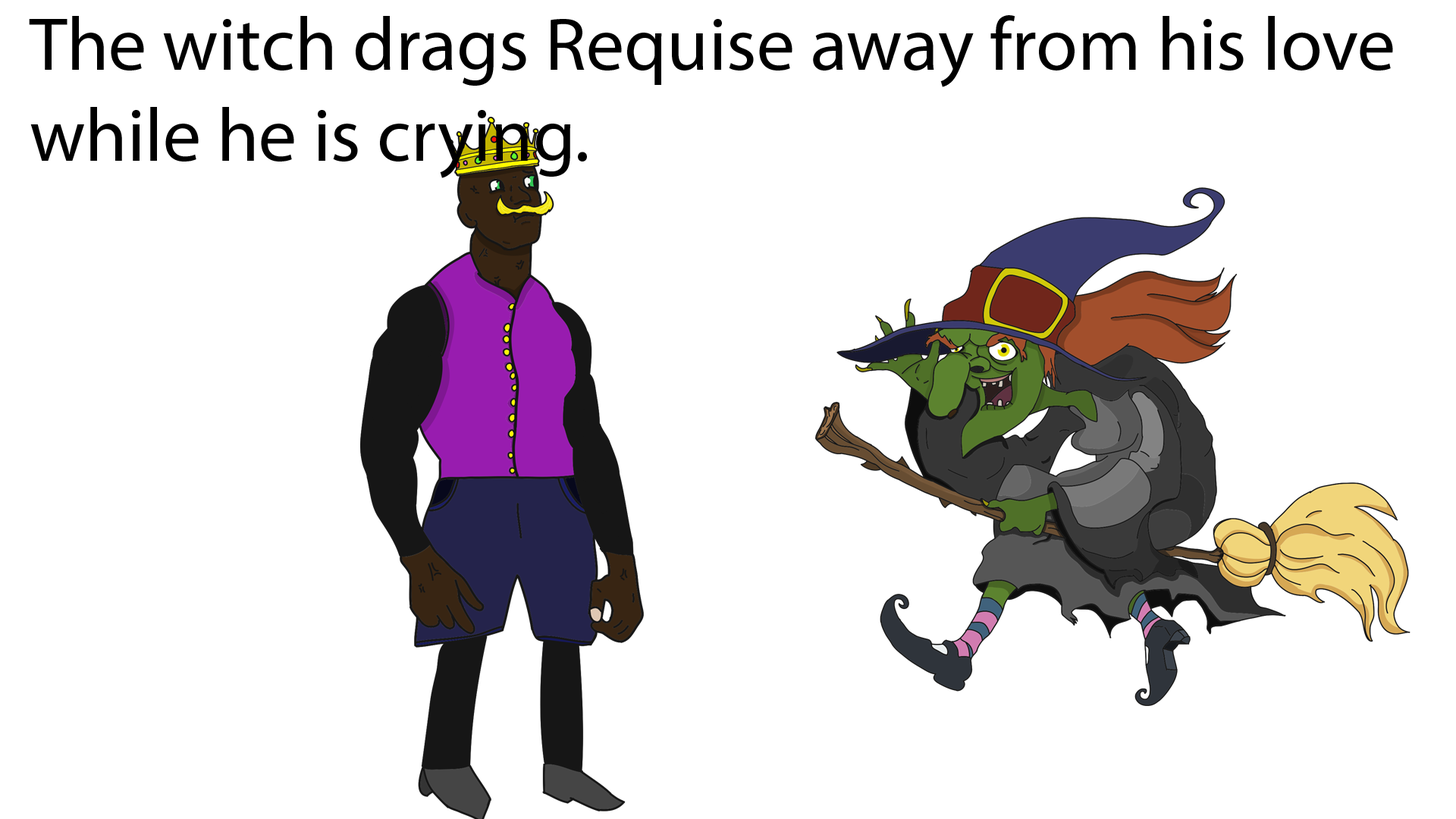
<style>
.page{position:relative;width:1456px;height:819px;background:#ffffff}
.page>*{position:absolute;margin:0}
.t1{font:75.8px "MyriadPro-Regular";color:#000000}
</style>
<div class="page">
<p class="t1" style="left:29px;top:15px;width:1364px;height:163px">The witch drags Requise away from his love while he is crying.</p>
</div>
